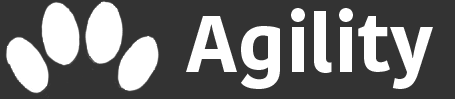
<style>
.page{position:relative;width:455px;height:99px;background:#333333}
.page>*{position:absolute;margin:0}
.t1{font:80px "KohinoorBangla-Bold";color:#ffffff}
</style>
<div class="page">
<p class="t1" style="left:186px;top:8px;width:247px;height:81px">Agility</p>
</div>
